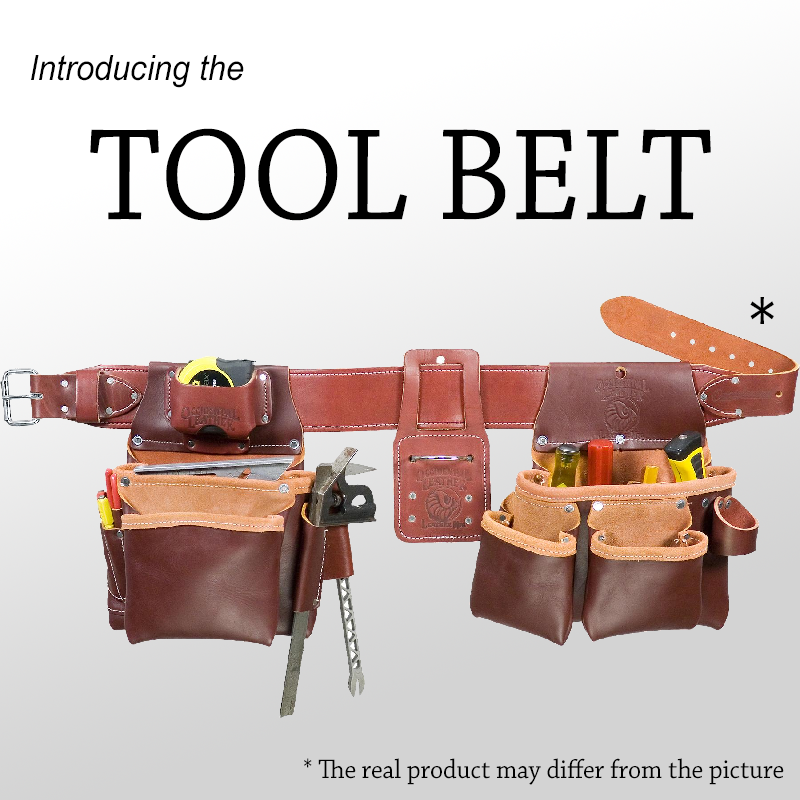
<style>
.page{position:relative;width:800px;height:800px}
.page>*{position:absolute;margin:0}
.t1{font:35px "Arial-ItalicMT";color:#000000;scale:0.93 1}
.t2{font:137px "ChaparralPro-Regular";color:#000000;scale:0.93 1}
.t3{font:86px "ChaparralPro-Regular";color:#000000;scale:0.93 1}
.t4{font:28px "ChaparralPro-Regular";color:#000000;scale:0.93 1}
</style>
<div class="page">
<p class="t1" style="left:31px;top:55px;width:213px;height:33px">Introducing the</p>
<p class="t2" style="left:90px;top:128px;width:621px;height:93px">TOOL BELT</p>
<p class="t3" style="left:750px;top:297px;width:24px;height:27px">*</p>
<p class="t4" style="left:304px;top:758px;width:480px;height:27px">* The real product may differ from the picture</p>
</div>
